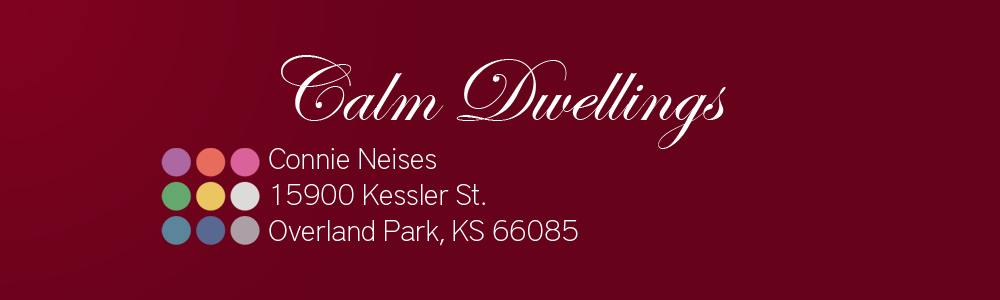
<style>
.page{position:relative;width:1000px;height:300px;background:#66021a}
.page>*{position:absolute;margin:0}
.t1{font:91.9px "EdwardianScriptITC";color:#ffffff}
.t2{font:30px "DistrictPro-Thin";color:#ffffff}
</style>
<div class="page">
<p class="t1" style="left:281px;top:55px;width:445px;height:94px">Calm Dwellings</p>
<p class="t2" style="left:269px;top:148px;width:309px;height:98px">Connie Neises<br>15900 Kessler St.<br>Overland Park, KS 66085</p>
</div>
